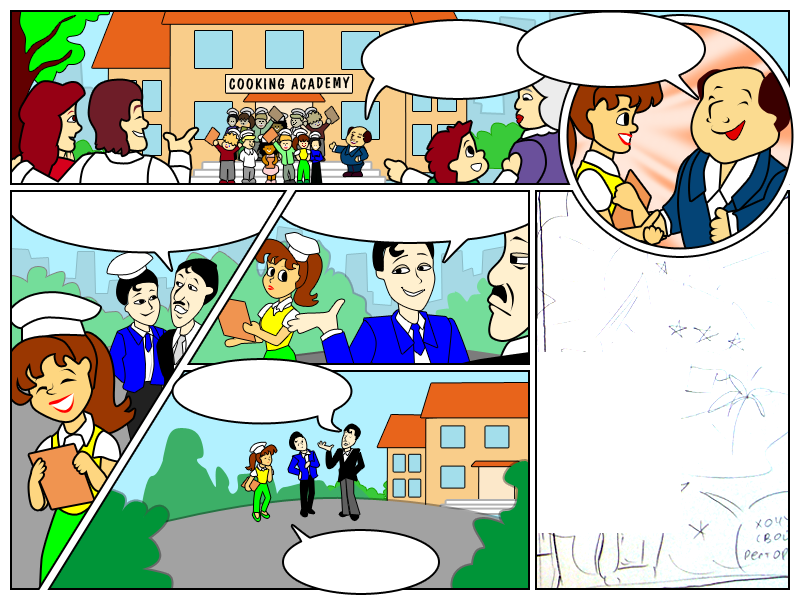
<style>
.page{position:relative;width:800px;height:600px;background:#ffffff}
.page>*{position:absolute;margin:0}
.t1{font:15.5px "DomCasualBT-Regular";letter-spacing:0.095em;color:#000000;scale:0.97 1}
</style>
<div class="page">
<p class="t1" style="left:229px;top:76px;width:121px;height:14px">COOKING ACADEMY</p>
<p class="t1" style="left:229px;top:76px;width:121px;height:14px">COOKING ACADEMY</p>
</div>
